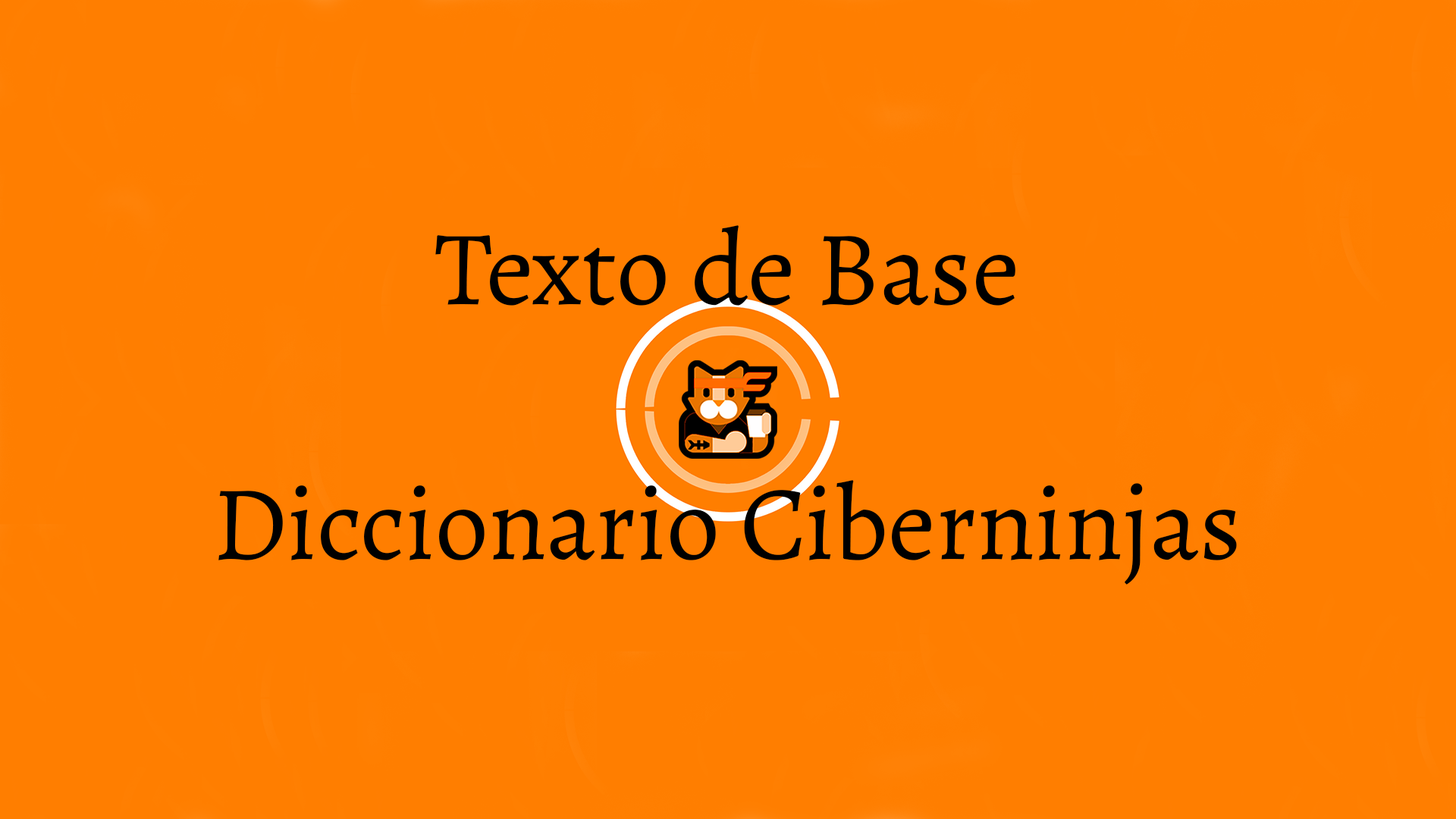
<style>
.page{position:relative;width:1456px;height:819px;background:#ff7e00}
.page>*{position:absolute;margin:0}
.t1{font:106.2px "Alegreya-Regular";color:#000000}
</style>
<div class="page">
<p class="t1" style="left:218px;top:225px;width:1019px;height:360px;text-align:center">Texto de Base<br><br>Diccionario Ciberninjas</p>
</div>
